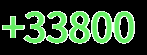
<style>
.page{position:relative;width:147px;height:55px;background:#000000}
.page>*{position:absolute;margin:0}
.t1{font:40px "WebPSD-18463539-0-Regular";color:#65ee62;font-weight:bold}
</style>
<div class="page">
<p class="t1" style="left:0px;top:0px;width:147px;height:55px">+33800</p>
</div>
